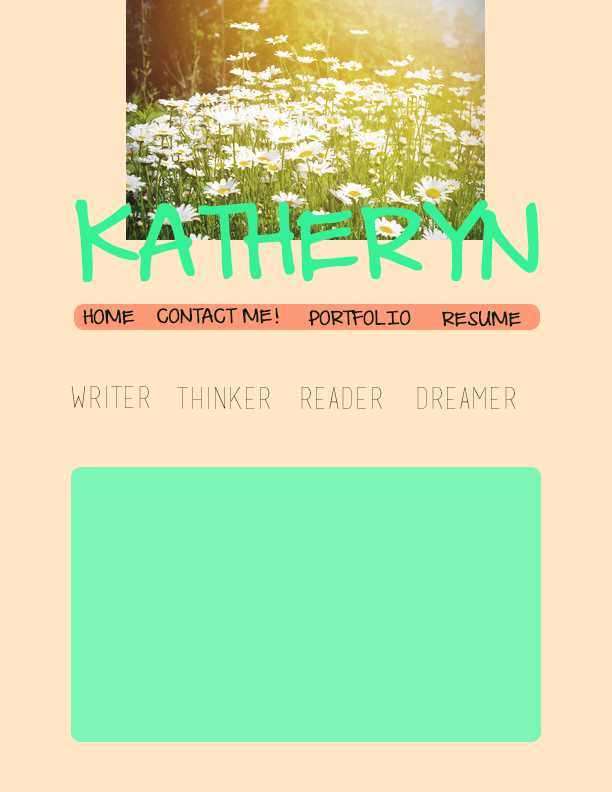
<style>
.page{position:relative;width:612px;height:792px;background:#ffe7c4}
.page>*{position:absolute;margin:0}
.t1{font:90px "DJBILoveMeSomeAly";color:#35f195;text-transform:uppercase;font-weight:bold}
.t2{font:18px "DJBILoveMeSomeAly";color:#051e12;text-transform:uppercase;font-weight:bold}
.t3{font:30px "basictitlefont";text-transform:uppercase}
.t4{font:30px "basictitlefont";color:#051e12;text-transform:uppercase}
</style>
<div class="page">
<p class="t1" style="left:75px;top:199px;width:464px;height:84px">Katheryn</p>
<p class="t2" style="left:83px;top:308px;width:52px;height:17px">home</p>
<p class="t2" style="left:157px;top:307px;width:122px;height:17px">Contact me!</p>
<p class="t2" style="left:308px;top:310px;width:103px;height:16px">portfolio</p>
<p class="t2" style="left:442px;top:311px;width:79px;height:16px">resume</p>
<p class="t3" style="left:71px;top:386px;width:79px;height:22px">writer</p>
<p class="t4" style="left:177px;top:387px;width:93px;height:22px">thinker</p>
<p class="t3" style="left:301px;top:387px;width:81px;height:22px">reader</p>
<p class="t3" style="left:417px;top:387px;width:99px;height:22px">dreamer</p>
</div>
